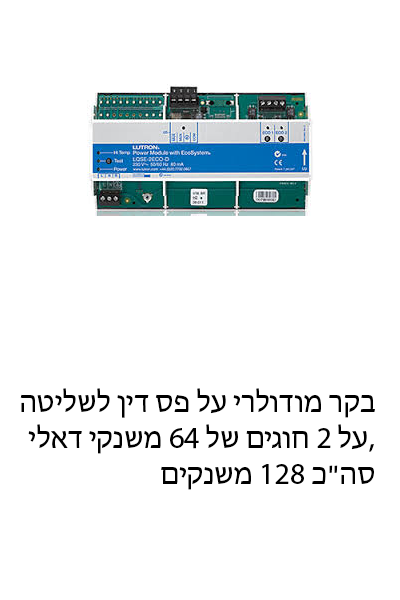
<style>
.page{position:relative;width:400px;height:600px;background:#ffffff}
.page>*{position:absolute;margin:0}
.t1{font:30px "MyriadHebrew-Regular";color:#000000}
</style>
<div class="page">
<p class="t1" style="left:20px;top:388px;width:355px;height:102px;text-align:right">בקר מודולרי על פס דין לשליטה<br>על 2 חוגים של 64 משנקי דאלי,<br>סה"כ 128 משנקים</p>
</div>
